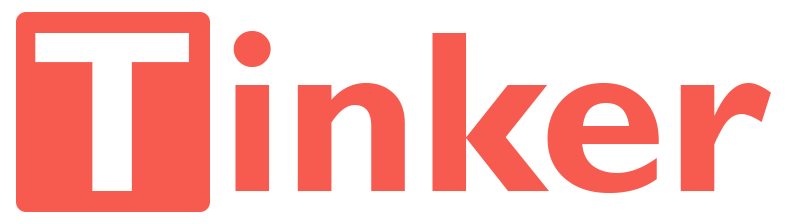
<style>
.page{position:relative;width:791px;height:224px;background:#ffffff}
.page>*{position:absolute;margin:0}
.t1{font:231px "GillSansMT-Bold";color:#ffffff}
.t2{font:231px "GillSansMT-Bold";color:#f75a4f}
</style>
<div class="page">
<p class="t1" style="left:35px;top:33px;width:154px;height:158px">T</p>
<p class="t2" style="left:233px;top:31px;width:538px;height:162px">inker</p>
</div>
